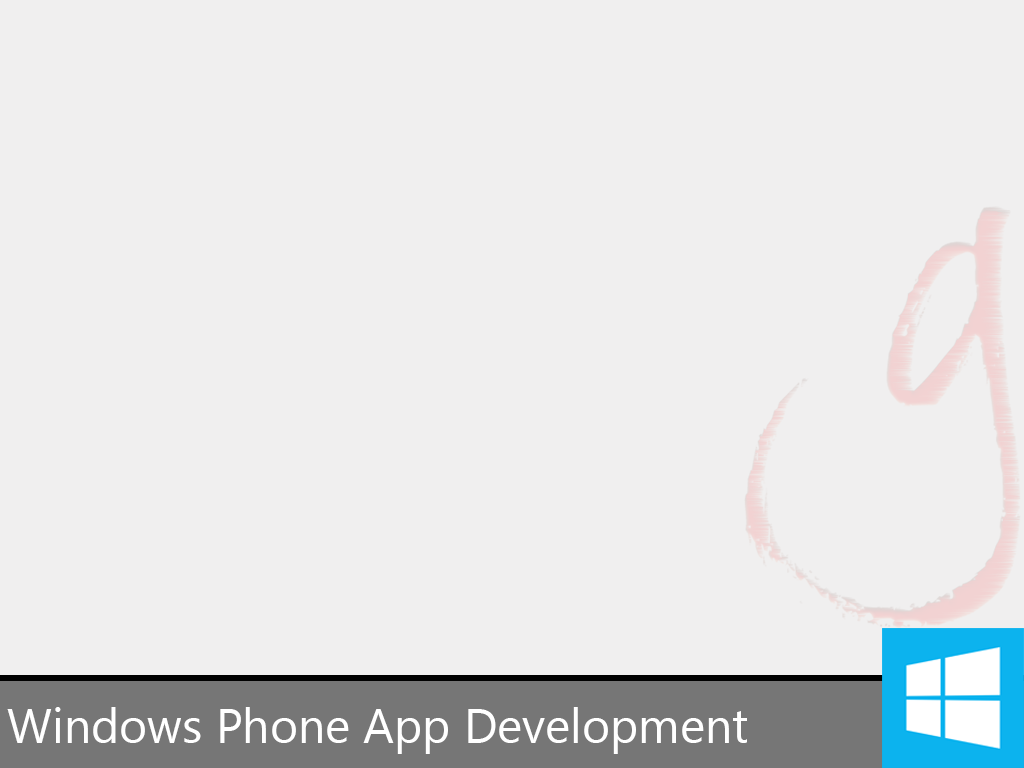
<style>
.page{position:relative;width:1024px;height:768px;background:#f0efef}
.page>*{position:absolute;margin:0}
.t1{font:48px "SegoeUI";color:#ffffff}
</style>
<div class="page">
<p class="t1" style="left:7px;top:707px;width:740px;height:47px">Windows Phone App Development</p>
</div>
